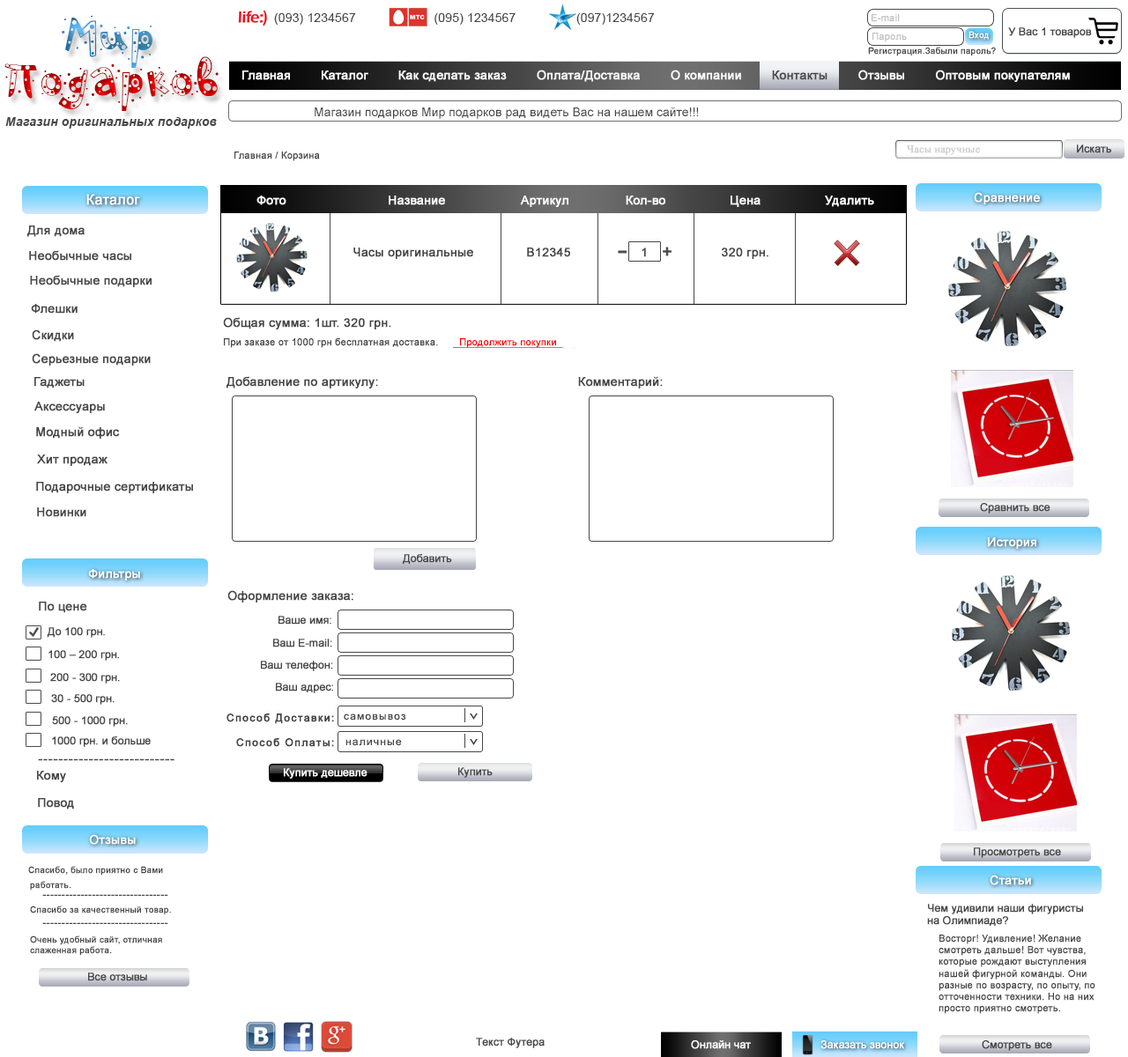
<style>
.page{position:relative;width:1128px;height:1057px;background:#ffffff}
.page>*{position:absolute;margin:0}
.t1{font:70.5px "PFPlayskoolPro-Confetti";letter-spacing:0.01em}
.t2{font:63.4px "PFPlayskoolPro-Confetti";letter-spacing:0.01em}
.t3{font:12.3px "ArialMT";letter-spacing:0.01em;color:#474747}
.t4{font:9.7px "ArialMT";color:#c1c1c1;font-weight:bold}
.t5{font:10.6px "ArialMT";color:#474747;font-weight:bold}
.t6{font:8.8px "ArialMT";color:#ffffff;font-weight:bold}
.t7{font:8.8px "ArialMT";color:#474747;font-weight:bold}
.t8{font:12.3px "ArialMT";color:#ffffff;font-weight:bold}
.t9{font:12.3px "ArialMT";color:#474747;font-weight:bold}
.t10{font:12.3px "ArialMT";color:#474747}
.t11{font:12.3px "Arial-BoldItalicMT";letter-spacing:0.01em;color:#474747}
.t12{font:10.6px "TimesNewRomanPSMT";color:#cecfd3;font-weight:bold}
.t13{font:9.7px "ArialMT";color:#474747;font-weight:bold}
.t14{font:14.1px "ArialMT";color:#ffffff;font-weight:bold}
.t15{font:9.7px "ArialMT";color:#f10000;font-weight:bold;text-decoration:underline}
.t16{font:10.6px "ArialMT";letter-spacing:0.1em;color:#444444;font-weight:bold}
.t17{font:10.6px "ArialMT";letter-spacing:0.1em;color:#444444}
.t18{font:14.1px "TimesNewRomanPSMT";color:#474747;font-weight:bold}
.t19{font:10.6px "ArialMT";color:#ffffff;font-weight:bold}
.t20{font:10.6px "TimesNewRomanPSMT";color:#474747;font-weight:bold}
</style>
<div class="page">
<p class="t1" style="left:62px;top:16px;width:90px;height:52px"><span class="t2">  </span> Мир</p>
<p class="t3" style="left:274px;top:13px;width:381px;height:12px">(093) 1234567                      (095) 1234567                 (097)1234567</p>
<p class="t4" style="left:871px;top:14px;width:29px;height:8px">E-mail</p>
<p class="t5" style="left:1008px;top:27px;width:84px;height:11px">У Вас 1 товаров</p>
<p class="t4" style="left:872px;top:33px;width:35px;height:9px">Пароль</p>
<p class="t6" style="left:968px;top:31px;width:21px;height:9px">Вход</p>
<p class="t7" style="left:868px;top:47px;width:128px;height:9px">Регистрация.Забыли пароль?</p>
<p class="t1" style="left:4px;top:56px;width:215px;height:55px">Подарков</p>
<p class="t8" style="left:242px;top:70px;width:828px;height:12px">Главная        Каталог        Как сделать заказ        Оплата/Доставка        О компании        <span class="t9">Контакты</span>        Отзывы        Оптовым покупателям</p>
<p class="t10" style="left:315px;top:107px;width:383px;height:12px">Магазин подарков Мир подарков рад видеть Вас на нашем сайте!!!</p>
<p class="t11" style="left:5px;top:117px;width:212px;height:12px">Магазин оригинальных подарков</p>
<p class="t12" style="left:906px;top:145px;width:74px;height:10px">Часы наручные</p>
<p class="t5" style="left:1077px;top:144px;width:34px;height:9px">Искать</p>
<p class="t13" style="left:234px;top:152px;width:86px;height:9px">Главная / Корзина</p>
<p class="t14" style="left:86px;top:194px;width:54px;height:11px">Каталог</p>
<p class="t8" style="left:256px;top:196px;width:618px;height:11px">Фото                           Название                    Артикул               Кол-во                 Цена                 Удалить</p>
<p class="t8" style="left:974px;top:192px;width:66px;height:12px">Сравнение</p>
<p class="t9" style="left:27px;top:226px;width:58px;height:11px">Для дома</p>
<p class="t9" style="left:29px;top:250px;width:102px;height:11px">Необычные часы</p>
<p class="t9" style="left:353px;top:248px;width:415px;height:11px">Часы оригинальные              B12345                                        320 грн.</p>
<p class="t9" style="left:641px;top:248px;width:5px;height:9px">1</p>
<p class="t9" style="left:30px;top:275px;width:122px;height:12px">Необычные подарки</p>
<p class="t9" style="left:31px;top:304px;width:47px;height:10px">Флешки</p>
<p class="t9" style="left:223px;top:317px;width:168px;height:13px">Общая сумма: 1шт. 320 грн.</p>
<p class="t9" style="left:32px;top:330px;width:42px;height:12px">Скидки</p>
<p class="t13" style="left:224px;top:337px;width:339px;height:11px">При заказе от 1000 грн бесплатная доставка.       <span class="t15">Продолжить покупки</span></p>
<p class="t9" style="left:32px;top:353px;width:119px;height:13px">Серьезные подарки</p>
<p class="t9" style="left:34px;top:377px;width:51px;height:12px">Гаджеты</p>
<p class="t9" style="left:226px;top:376px;width:437px;height:13px">Добавление по артикулу:                                                     Комментарий:</p>
<p class="t9" style="left:34px;top:402px;width:71px;height:11px">Аксессуары</p>
<p class="t9" style="left:36px;top:426px;width:84px;height:13px">Модный офис</p>
<p class="t9" style="left:37px;top:455px;width:70px;height:11px">Хит продаж</p>
<p class="t9" style="left:36px;top:482px;width:157px;height:11px">Подарочные сертификаты</p>
<p class="t9" style="left:37px;top:508px;width:49px;height:9px">Новинки</p>
<p class="t5" style="left:980px;top:503px;width:70px;height:11px">Сравнить все</p>
<p class="t8" style="left:988px;top:537px;width:48px;height:12px">История</p>
<p class="t5" style="left:403px;top:554px;width:49px;height:11px">Добавить</p>
<p class="t8" style="left:88px;top:569px;width:52px;height:12px">Фильтры</p>
<p class="t9" style="left:227px;top:590px;width:126px;height:13px">Оформление заказа:</p>
<p class="t9" style="left:39px;top:602px;width:48px;height:11px">По цене</p>
<p class="t5" style="left:278px;top:616px;width:53px;height:9px">Ваше имя:</p>
<p class="t5" style="left:47px;top:627px;width:58px;height:11px">До 100 грн.</p>
<p class="t5" style="left:273px;top:639px;width:59px;height:9px">Ваш E-mail:</p>
<p class="t5" style="left:48px;top:650px;width:71px;height:11px">100 – 200 грн.</p>
<p class="t5" style="left:261px;top:661px;width:72px;height:10px">Ваш телефон:</p>
<p class="t5" style="left:50px;top:673px;width:70px;height:11px">200 - 300 грн.</p>
<p class="t5" style="left:276px;top:683px;width:57px;height:10px">Ваш адрес:</p>
<p class="t5" style="left:51px;top:694px;width:64px;height:11px">30 - 500 грн.</p>
<p class="t16" style="left:226px;top:714px;width:108px;height:10px">Способ Доставки:</p>
<p class="t17" style="left:344px;top:714px;width:62px;height:7px">самовывоз</p>
<p class="t5" style="left:52px;top:716px;width:76px;height:11px">500 - 1000 грн.</p>
<p class="t5" style="left:52px;top:737px;width:99px;height:10px">1000 грн. и больше</p>
<p class="t16" style="left:236px;top:738px;width:98px;height:9px">Способ Оплаты:</p>
<p class="t17" style="left:345px;top:739px;width:57px;height:7px">наличные</p>
<p class="t18" style="left:38px;top:759px;width:136px;height:2px">---------------------------</p>
<p class="t9" style="left:37px;top:771px;width:29px;height:11px">Кому</p>
<p class="t19" style="left:284px;top:768px;width:83px;height:11px">Купить дешевле</p>
<p class="t5" style="left:458px;top:767px;width:35px;height:11px">Купить</p>
<p class="t9" style="left:38px;top:798px;width:36px;height:12px">Повод</p>
<p class="t8" style="left:89px;top:834px;width:47px;height:11px">Отзывы</p>
<p class="t5" style="left:974px;top:848px;width:87px;height:10px">Просмотреть все</p>
<p class="t7" style="left:28px;top:866px;width:135px;height:10px">Спасибо, было приятно с Вами</p>
<p class="t7" style="left:30px;top:881px;width:41px;height:10px">работать.</p>
<p class="t8" style="left:989px;top:875px;width:42px;height:10px">Статьи</p>
<p class="t7" style="left:30px;top:906px;width:141px;height:9px">Спасибо за качественный товар.</p>
<p class="t20" style="left:42px;top:894px;width:126px;height:2px">---------------------------------</p>
<p class="t5" style="left:927px;top:904px;width:156px;height:22px">Чем удивили наши фигуристы<br>на Олимпиаде?</p>
<p class="t20" style="left:42px;top:923px;width:126px;height:1px">---------------------------------</p>
<p class="t7" style="left:30px;top:936px;width:132px;height:20px">Очень удобный сайт, отличная <br>слаженная работа.</p>
<p class="t13" style="left:938px;top:935px;width:157px;height:79px">Восторг! Удивление! Желание <br>смотреть дальше! Вот чувства, <br>которые рождают выступления <br>нашей фигурной команды. Они <br>разные по возрасту, по опыту, по <br>отточенности техники. Но на них <br>просто приятно смотреть.</p>
<p class="t5" style="left:88px;top:973px;width:59px;height:9px">Все отзывы</p>
<p class="t5" style="left:476px;top:1038px;width:69px;height:10px">Текст Футера</p>
<p class="t19" style="left:691px;top:1041px;width:60px;height:8px">Онлайн чат</p>
<p class="t19" style="left:820px;top:1041px;width:84px;height:8px">Заказать звонок</p>
<p class="t5" style="left:982px;top:1041px;width:70px;height:10px">Смотреть все</p>
</div>
